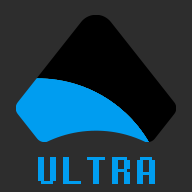
<style>
.page{position:relative;width:192px;height:192px;background:#2d2d2d}
.page>*{position:absolute;margin:0}
.t1{font:36px "BIG-SHOT";letter-spacing:0.02em;color:#009df0}
</style>
<div class="page">
<p class="t1" style="left:38px;top:157px;width:117px;height:27px">ULTRA</p>
</div>
